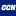
<style>
.page{position:relative;width:16px;height:16px;background:#082176}
.page>*{position:absolute;margin:0}
.t1{font:7px "FugazOne-Regular";color:#ffffff}
</style>
<div class="page">
<p class="t1" style="left:1px;top:4px;width:15px;height:7px">CCN</p>
</div>
